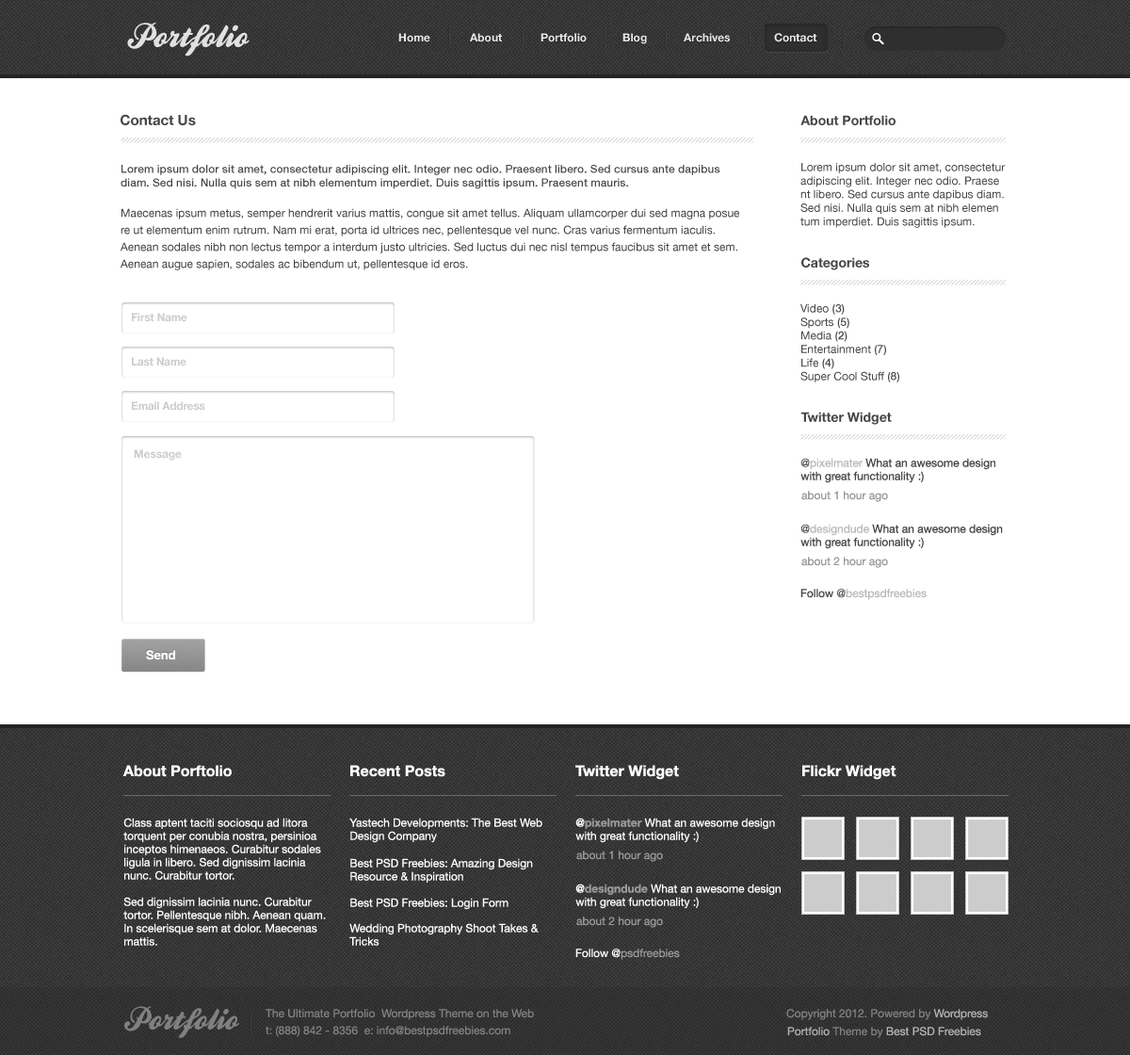
<style>
.page{position:relative;width:1130px;height:1055px;background:#ffffff}
.page>*{position:absolute;margin:0}
.t1{font:33.9px "BallparkWeiner";color:#e0e0e0}
.t2{font:11.3px "HelveticaNeue-Bold";color:#e8e8e8}
.t3{font:14.1px "HelveticaNeue-Bold";color:#464646}
.t4{font:13.2px "HelveticaNeue-Bold";color:#464646}
.t5{font:11.3px/17px "HelveticaNeue";color:#414141}
.t6{font:11.3px "HelveticaNeue-Medium";color:#464646}
.t7{font:11.3px "HelveticaNeue";color:#464646}
.t8{font:11.3px "HelveticaNeue-Bold";color:#cccccc;scale:0.95 1}
.t9{font:11.3px "HelveticaNeue-Bold";color:#cccccc}
.t10{font:11.3px/13.2px "HelveticaNeue";color:#464646}
.t11{font:11.3px/13.2px "HelveticaNeue-Light";color:#464646}
.t12{font:11.3px/13.2px "HelveticaNeue";color:#bababa}
.t13{font:11.3px "HelveticaNeue";color:#999999}
.t14{font:11.3px "HelveticaNeue";color:#bababa}
.t15{font:11.3px "HelveticaNeue-Light";color:#464646}
.t16{font:12.2px "HelveticaNeue-Bold";color:#ffffff}
.t17{font:15.1px "HelveticaNeue-Bold";color:#ffffff}
.t18{font:11.3px/13.2px "HelveticaNeue";color:#ffffff}
.t19{font:11.3px/13.2px "HelveticaNeue-Bold";color:#ffffff}
.t20{font:11.3px/13.2px "HelveticaNeue-Bold";color:#999999}
.t21{font:11.3px "HelveticaNeue";color:#ffffff}
.t22{font:32px "BallparkWeiner";color:#808080}
.t23{font:11.3px "HelveticaNeue";color:#818181}
.t24{font:11.3px "HelveticaNeue";color:#b2b2b2}
</style>
<div class="page">
<p class="t1" style="left:127px;top:23px;width:123px;height:34px">Portfolio</p>
<p class="t2" style="left:398px;top:33px;width:32px;height:9px">Home</p>
<p class="t2" style="left:470px;top:33px;width:32px;height:9px">About</p>
<p class="t2" style="left:541px;top:33px;width:46px;height:9px">Portfolio</p>
<p class="t2" style="left:623px;top:33px;width:24px;height:11px">Blog</p>
<p class="t2" style="left:684px;top:33px;width:46px;height:9px">Archives</p>
<p class="t2" style="left:774px;top:33px;width:44px;height:9px">Contact</p>
<p class="t3" style="left:121px;top:114px;width:75px;height:11px">Contact Us</p>
<p class="t4" style="left:801px;top:115px;width:95px;height:10px">About Portfolio</p>
<p class="t5" style="left:121px;top:165px;width:618px;height:105px"><span class="t6">Lorem ipsum dolor sit amet, consectetur adipiscing elit. Integer nec odio. Praesent libero. Sed cursus ante dapibus diam. Sed nisi. Nulla quis sem at nibh elementum imperdiet. Duis sagittis ipsum. Praesent mauris.<br><br></span>Maecenas ipsum metus, semper hendrerit varius mattis, congue sit amet tellus. Aliquam ullamcorper dui sed magna posue re ut elementum enim rutrum. Nam mi erat, porta id ultrices nec, pellentesque vel nunc. Cras varius fermentum iaculis. Aenean sodales nibh non lectus tempor a interdum justo ultricies. Sed luctus dui nec nisl tempus faucibus sit amet et sem. Aenean augue sapien, sodales ac bibendum ut, pellentesque id eros.</p>
<p class="t7" style="left:801px;top:163px;width:205px;height:65px">Lorem ipsum dolor sit amet, consectetur adipiscing elit. Integer nec odio. Praese nt libero. Sed cursus ante dapibus diam. Sed nisi. Nulla quis sem at nibh elemen tum imperdiet. Duis sagittis ipsum.</p>
<p class="t4" style="left:802px;top:257px;width:67px;height:13px">Categories</p>
<p class="t7" style="left:801px;top:304px;width:99px;height:78px">Video <span class="t6">(3)<br></span>Sports <span class="t6">(5)<br></span>Media <span class="t6">(2)<br></span>Entertainment<span class="t6"> (7)<br></span>Life <span class="t6">(4)<br></span>Super Cool Stuff <span class="t6">(8)</span></p>
<p class="t8" style="left:132px;top:313px;width:55px;height:9px">First Name</p>
<p class="t8" style="left:132px;top:357px;width:55px;height:9px">Last Name</p>
<p class="t8" style="left:132px;top:401px;width:73px;height:10px">Email Address</p>
<p class="t4" style="left:801px;top:412px;width:91px;height:13px">Twitter Widget</p>
<p class="t9" style="left:134px;top:449px;width:48px;height:12px">Message</p>
<p class="t10" style="left:801px;top:458px;width:195px;height:25px"><span class="t11">@</span><span class="t12">pixelmater</span> What an awesome design with great functionality :)</p>
<p class="t13" style="left:802px;top:491px;width:86px;height:11px">about 1 hour ago</p>
<p class="t10" style="left:801px;top:524px;width:202px;height:25px"><span class="t11">@</span><span class="t12">designdude</span> What an awesome design with great functionality :)</p>
<p class="t13" style="left:802px;top:557px;width:86px;height:11px">about 2 hour ago</p>
<p class="t14" style="left:801px;top:589px;width:126px;height:11px"><span class="t7">Follow </span><span class="t15">@</span>bestpsdfreebies</p>
<p class="t16" style="left:146px;top:650px;width:29px;height:10px">Send</p>
<p class="t17" style="left:122px;top:765px;width:110px;height:12px">About Porftolio</p>
<p class="t17" style="left:350px;top:765px;width:96px;height:12px">Recent Posts</p>
<p class="t17" style="left:576px;top:765px;width:103px;height:15px">Twitter Widget</p>
<p class="t17" style="left:803px;top:765px;width:94px;height:15px">Flickr Widget</p>
<p class="t18" style="left:123px;top:818px;width:203px;height:128px">Class aptent taciti sociosqu ad litora torquent per conubia nostra, persinioa inceptos himenaeos. Curabitur sodales ligula in libero. Sed dignissim lacinia nunc. Curabitur tortor. <br><br>Sed dignissim lacinia nunc. Curabitur tortor. Pellentesque nibh. Aenean quam. In scelerisque sem at dolor. Maecenas mattis.</p>
<p class="t18" style="left:349px;top:818px;width:194px;height:25px">Yastech Developments: The Best Web Design Company</p>
<p class="t18" style="left:576px;top:818px;width:199px;height:25px"><span class="t19">@</span><span class="t20">pixelmater</span> What an awesome design with great functionality :)</p>
<p class="t13" style="left:576px;top:851px;width:87px;height:11px">about 1 hour ago</p>
<p class="t18" style="left:350px;top:858px;width:183px;height:25px">Best PSD Freebies: Amazing Design Resource &amp; Inspiration</p>
<p class="t18" style="left:576px;top:884px;width:205px;height:25px"><span class="t19">@</span><span class="t20">designdude</span> What an awesome design with great functionality :)</p>
<p class="t21" style="left:350px;top:898px;width:159px;height:12px">Best PSD Freebies: Login Form</p>
<p class="t13" style="left:576px;top:916px;width:87px;height:12px">about 2 hour ago</p>
<p class="t18" style="left:349px;top:923px;width:190px;height:23px">Wedding Photography Shoot Takes &amp; Tricks</p>
<p class="t13" style="left:576px;top:949px;width:104px;height:11px"><span class="t21">Follow @</span>psdfreebies</p>
<p class="t22" style="left:124px;top:1006px;width:115px;height:32px">Portfolio</p>
<p class="t23" style="left:266px;top:1009px;width:268px;height:11px">The Ultimate Portfolio  Wordpress Theme on the Web</p>
<p class="t23" style="left:787px;top:1009px;width:201px;height:11px">Copyright 2012. Powered by <span class="t24">Wordpress</span></p>
<p class="t23" style="left:266px;top:1026px;width:245px;height:11px">t: (888) 842 - 8356  e: info@bestpsdfreebies.com</p>
<p class="t24" style="left:787px;top:1027px;width:194px;height:11px">Portfolio<span class="t23"> Theme by </span>Best PSD Freebies</p>
</div>
